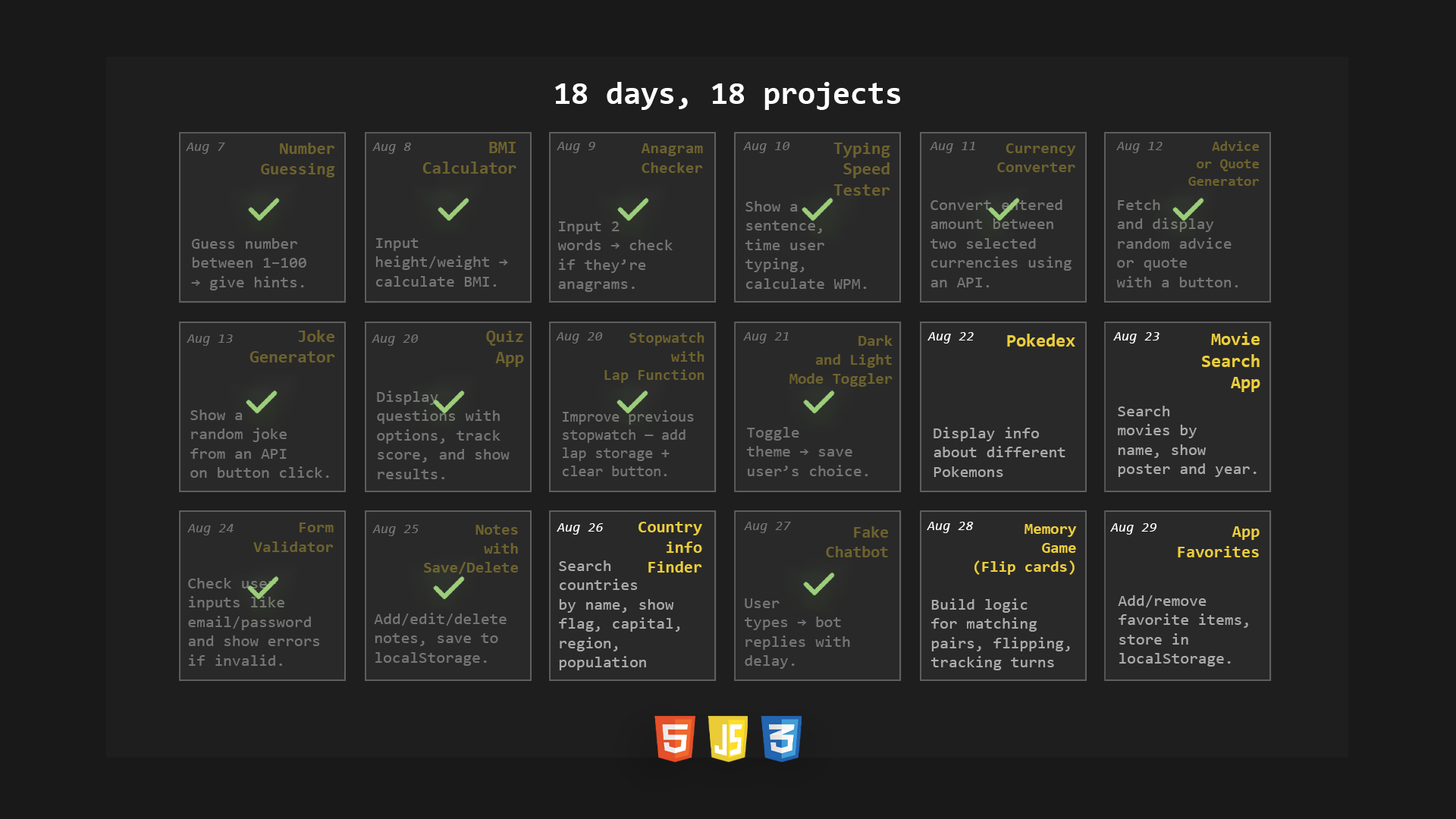
<style>
.page{position:relative;width:1456px;height:819px;background:#191919}
.page>*{position:absolute;margin:0}
.t1{font:31.7px "Consolas-Bold";color:#fefefe}
.t2{font:13.9px "Consolas-Italic";color:#757575}
.t3{font:16.9px "Consolas-Bold";color:#6d622e}
.t4{font:17.2px "Consolas-Bold";color:#6d622e}
.t5{font:16px "Consolas-Bold";color:#6d622e}
.t6{font:17.3px "Consolas-Bold";color:#6d622e}
.t7{font:15.9px "Consolas-Bold";color:#6d622e}
.t8{font:14.4px "Consolas-Bold";color:#6d622e}
.t9{font:16.1px "Consolas";color:#757575}
.t10{font:15.4px "Consolas-Bold";color:#6d622e}
.t11{font:15.7px "Consolas-Bold";color:#6d622e}
.t12{font:13.9px "Consolas-Italic";color:#ffffff}
.t13{font:17.9px "Consolas-Bold";color:#ebce3c}
.t14{font:15.1px "Consolas";color:#757575}
.t15{font:16.1px "Consolas";color:#ababab}
.t16{font:16.7px "Consolas-Bold";color:#ebce3c}
.t17{font:16.3px "Consolas-Bold";color:#6d622e}
.t18{font:15.8px "Consolas-Bold";color:#6d622e}
.t19{font:16.4px "Consolas-Bold";color:#6d622e}
.t20{font:15.7px "Consolas-Bold";color:#ebce3c}
.t21{font:16.8px "Consolas-Bold";color:#ebce3c}
</style>
<div class="page">
<p class="t1" style="left:555px;top:82px;width:345px;height:28px">18 days, 18 projects</p>
<p class="t2" style="left:186px;top:143px;width:39px;height:11px">Aug 7</p>
<p class="t3" style="left:261px;top:143px;width:74px;height:34px;text-align:right">Number<br>Guessing</p>
<p class="t2" style="left:372px;top:143px;width:39px;height:11px">Aug 8</p>
<p class="t4" style="left:422px;top:142px;width:94px;height:32px;text-align:right">BMI<br>Calculator</p>
<p class="t2" style="left:557px;top:142px;width:38px;height:11px">Aug 9</p>
<p class="t5" style="left:641px;top:143px;width:62px;height:30px;text-align:right">Anagram<br>Checker</p>
<p class="t2" style="left:743px;top:142px;width:47px;height:11px">Aug 10</p>
<p class="t6" style="left:833px;top:143px;width:57px;height:53px;text-align:right">Typing<br>Speed<br>Tester</p>
<p class="t2" style="left:930px;top:142px;width:45px;height:11px">Aug 11</p>
<p class="t7" style="left:997px;top:143px;width:79px;height:29px;text-align:right">Currency<br>Converter</p>
<p class="t2" style="left:1116px;top:142px;width:47px;height:11px">Aug 12</p>
<p class="t8" style="left:1188px;top:141px;width:72px;height:45px;text-align:right">Advice<br>or Quote<br>Generator</p>
<p class="t9" style="left:745px;top:201px;width:122px;height:88px">Show a <br>sentence, <br>time user <br>typing, <br>calculate WPM.</p>
<p class="t9" style="left:930px;top:199px;width:142px;height:88px">Convert entered <br>amount between <br>two selected <br>currencies using <br>an API.</p>
<p class="t9" style="left:1116px;top:199px;width:122px;height:88px">Fetch <br>and display <br>random advice<br>or quote <br>with a button.</p>
<p class="t9" style="left:557px;top:221px;width:116px;height:71px">Input 2 <br>words → check <br>if they’re <br>anagrams.</p>
<p class="t9" style="left:191px;top:238px;width:115px;height:52px">Guess number<br>between 1–100 <br>→ give hints.</p>
<p class="t9" style="left:375px;top:238px;width:133px;height:49px">Input <br>height/weight → <br>calculate BMI.</p>
<p class="t6" style="left:249px;top:330px;width:86px;height:32px;text-align:right">Joke<br>Generator</p>
<p class="t2" style="left:187px;top:334px;width:46px;height:12px">Aug 13</p>
<p class="t2" style="left:372px;top:334px;width:47px;height:12px">Aug 20</p>
<p class="t6" style="left:486px;top:331px;width:38px;height:36px;text-align:right">Quiz<br>App</p>
<p class="t2" style="left:556px;top:332px;width:47px;height:12px">Aug 20</p>
<p class="t10" style="left:604px;top:332px;width:100px;height:51px;text-align:right">Stopwatch<br>with<br>Lap Function</p>
<p class="t2" style="left:743px;top:332px;width:46px;height:12px">Aug 21</p>
<p class="t11" style="left:789px;top:335px;width:104px;height:52px;text-align:right">Dark<br>and Light<br>Mode Toggler</p>
<p class="t12" style="left:927px;top:332px;width:47px;height:12px">Aug 22</p>
<p class="t13" style="left:1007px;top:334px;width:68px;height:13px">Pokedex</p>
<p class="t12" style="left:1113px;top:332px;width:46px;height:12px">Aug 23</p>
<p class="t13" style="left:1202px;top:332px;width:58px;height:60px;text-align:right">Movie<br>Search<br>App</p>
<p class="t9" style="left:377px;top:391px;width:133px;height:88px">Display <br>questions with <br>options, track <br>score, and show <br>results.</p>
<p class="t9" style="left:190px;top:409px;width:139px;height:69px">Show a <br>random joke <br>from an API <br>on button click.</p>
<p class="t14" style="left:562px;top:410px;width:132px;height:66px">Improve previous <br>stopwatch — add <br>lap storage + <br>clear button.</p>
<p class="t15" style="left:1118px;top:406px;width:139px;height:71px">Search <br>movies by <br>name, show <br>poster and year.</p>
<p class="t9" style="left:746px;top:427px;width:122px;height:49px">Toggle <br>theme → save <br>user’s choice.</p>
<p class="t15" style="left:933px;top:427px;width:132px;height:50px">Display info<br>about different<br>Pokemons</p>
<p class="t16" style="left:639px;top:522px;width:63px;height:51px;text-align:right">Country<br>info<br>Finder</p>
<p class="t2" style="left:744px;top:522px;width:47px;height:11px">Aug 27</p>
<p class="t12" style="left:927px;top:522px;width:47px;height:11px">Aug 28</p>
<p class="t2" style="left:187px;top:524px;width:47px;height:11px">Aug 24</p>
<p class="t17" style="left:253px;top:522px;width:81px;height:30px;text-align:right">Form<br>Validator</p>
<p class="t2" style="left:372px;top:525px;width:47px;height:11px">Aug 25</p>
<p class="t18" style="left:424px;top:525px;width:94px;height:49px;text-align:right">Notes<br>with<br>Save/Delete</p>
<p class="t12" style="left:557px;top:523px;width:46px;height:12px">Aug 26</p>
<p class="t19" style="left:826px;top:526px;width:62px;height:31px;text-align:right">Fake<br>Chatbot</p>
<p class="t20" style="left:974px;top:524px;width:103px;height:51px;text-align:right">Memory<br>Game<br>(Flip cards)</p>
<p class="t12" style="left:1110px;top:523px;width:46px;height:12px">Aug 29</p>
<p class="t21" style="left:1178px;top:526px;width:82px;height:31px;text-align:right">App<br>Favorites</p>
<p class="t15" style="left:559px;top:560px;width:121px;height:110px">Search <br>countries<br>by name, show<br>flag, capital,<br>region, <br>population</p>
<p class="t9" style="left:188px;top:578px;width:132px;height:88px">Check user <br>inputs like <br>email/password <br>and show errors <br>if invalid.</p>
<p class="t9" style="left:744px;top:598px;width:106px;height:71px">User <br>types → bot <br>replies with <br>delay.</p>
<p class="t15" style="left:930px;top:598px;width:140px;height:72px">Build logic<br>for matching <br>pairs, flipping, <br>tracking turns</p>
<p class="t15" style="left:1118px;top:595px;width:130px;height:72px">Add/remove <br>favorite items, <br>store in <br>localStorage.</p>
<p class="t9" style="left:374px;top:613px;width:133px;height:53px">Add/edit/delete<br>notes, save to<br>localStorage.</p>
</div>
